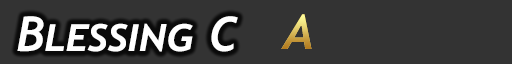
<style>
.page{position:relative;width:512px;height:64px;background:#333333}
.page>*{position:absolute;margin:0}
.t1{font:48px "Trebuchet-BoldItalic";color:#ffffff;font-variant:small-caps}
</style>
<div class="page">
<p class="t1" style="left:17px;top:16px;width:221px;height:36px">Blessing C</p>
</div>
